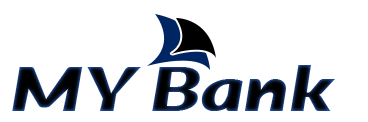
<style>
.page{position:relative;width:368px;height:122px;background:#ffffff}
.page>*{position:absolute;margin:0}
.t1{font:61.1px "Lato-BlackItalic";scale:1.35 1}
</style>
<div class="page">
<p class="t1" style="left:12px;top:65px;width:323px;height:46px">MY Bank</p>
</div>
